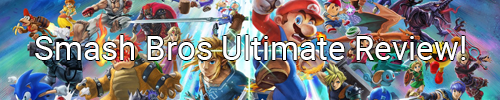
<style>
.page{position:relative;width:500px;height:100px}
.page>*{position:absolute;margin:0}
.t1{font:33.3px "Roboto-Regular";color:#ffffff}
</style>
<div class="page">
<p class="t1" style="left:35px;top:35px;width:431px;height:25px">Smash Bros Ultimate Review!</p>
</div>
